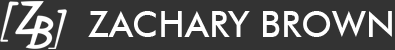
<style>
.page{position:relative;width:395px;height:50px;background:#333333}
.page>*{position:absolute;margin:0}
.t1{font:36px "FuturaBT-Medium";color:#ffffff}
</style>
<div class="page">
<p class="t1" style="left:88px;top:11px;width:304px;height:26px">ZACHARY BROWN</p>
</div>
